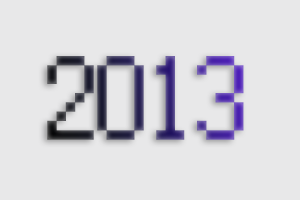
<style>
.page{position:relative;width:300px;height:200px;background:#e8e8e9}
.page>*{position:absolute;margin:0}
.t1{font:111.4px "Power-Red-and-Green";letter-spacing:-0.05em}
</style>
<div class="page">
<p class="t1" style="left:47px;top:56px;width:197px;height:84px">2013</p>
</div>
